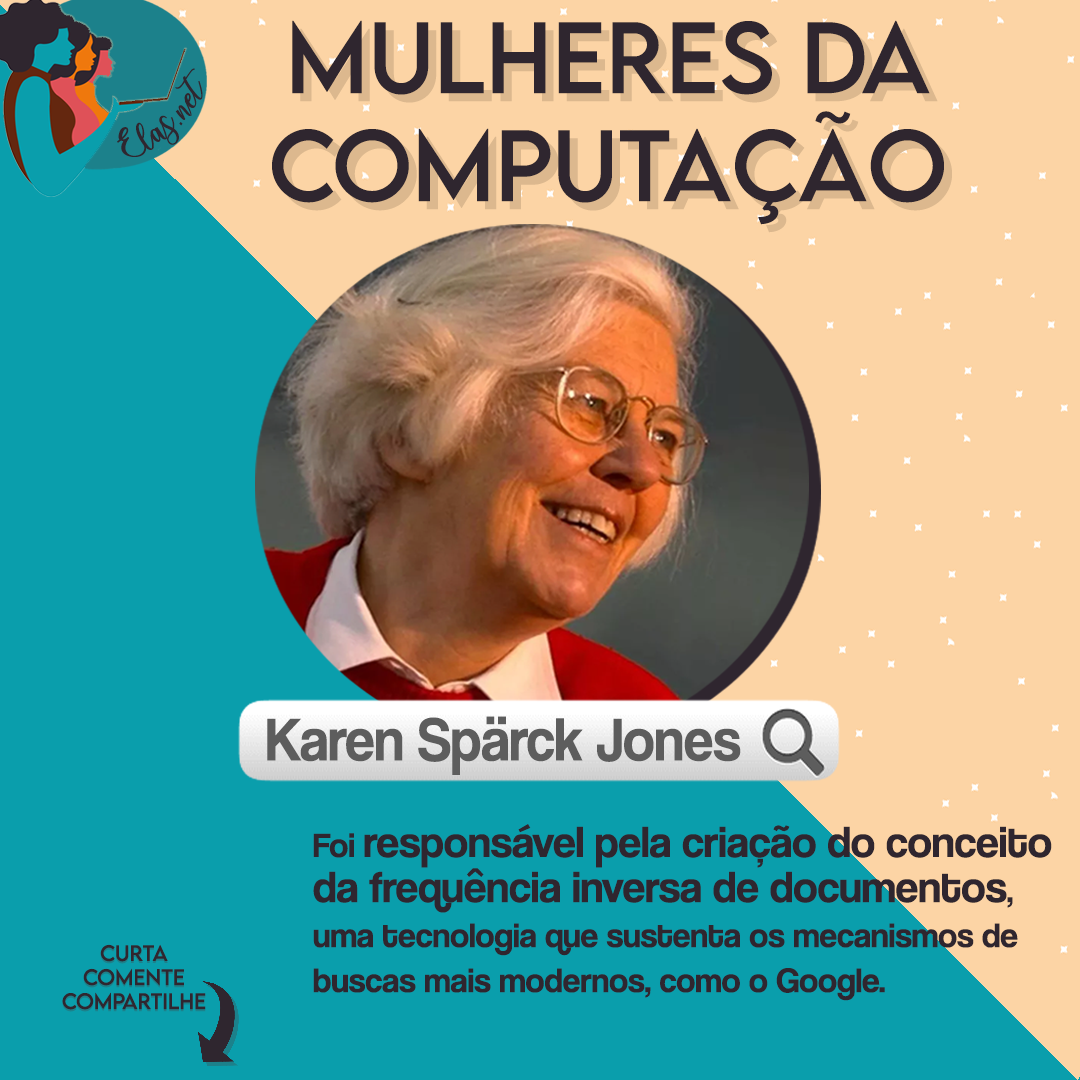
<style>
.page{position:relative;width:1080px;height:1080px;background:#0a9eac}
.page>*{position:absolute;margin:0}
.t1{font:90px "LEMONMILK-Regular";color:#2f262f}
.t2{font:25px "charlinda-Regular";color:#2f262f;scale:1.18 1}
.t3{font:62.3px "CoolveticaRg-Regular";color:#5d5d5d;scale:0.93 1}
.t4{font:35px/45px "CoolveticaRg-Regular";color:#2f262f}
.t5{font:45px/45px "CoolveticaRg-Regular";color:#2f262f}
.t6{font:20px "LEMONMILK-Regular"}
.t7{font:20px "LEMONMILK-Regular";color:#2f262f}
</style>
<div class="page">
<p class="t1" style="left:272px;top:20px;width:672px;height:205px;text-align:center">Mulheres da<br>Computação</p>
<p class="t2" style="left:117px;top:68px;width:86px;height:89px;rotate:-43deg">Elas.net</p>
<p class="t3" style="left:267px;top:716px;width:474px;height:59px">Karen Spärck Jones</p>
<p class="t4" style="left:313px;top:824px;width:739px;height:177px">Foi <span class="t5">responsável pela criação do conceito <br>da frequência inversa de documentos</span>, <br>uma tecnologia que sustenta os mecanismos de <br>buscas mais modernos, como o Google.</p>
<p class="t6" style="left:62px;top:946px;width:144px;height:66px;text-align:center">Curta<br>Comente<br>Compartilhe</p>
<p class="t7" style="left:62px;top:944px;width:144px;height:66px;text-align:center">Curta<br>Comente<br>Compartilhe</p>
</div>
